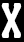
<style>
.page{position:relative;width:24px;height:42px;background:#000000}
.page>*{position:absolute;margin:0}
.t1{font:48.7px "CreditCard";color:#ffffff;scale:0.84 1}
</style>
<div class="page">
<p class="t1" style="left:1px;top:3px;width:21px;height:35px">X</p>
</div>
